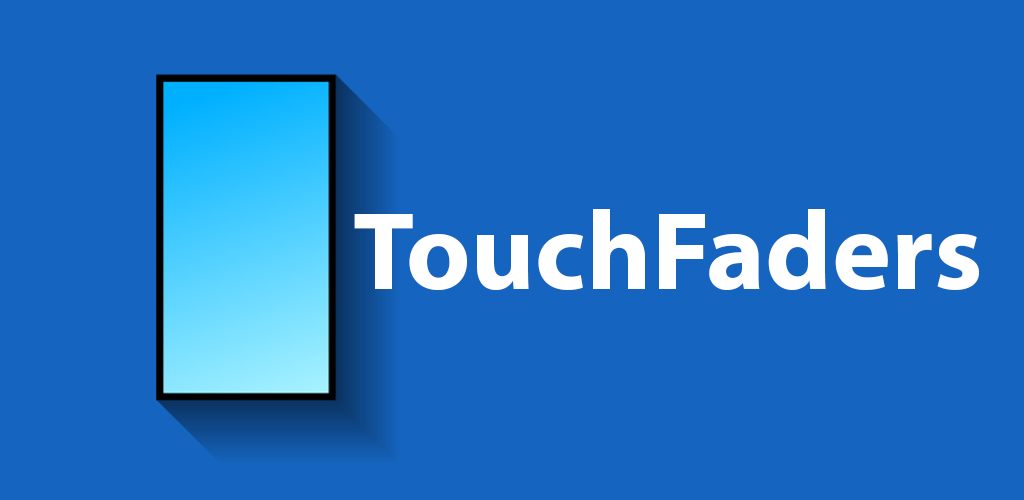
<style>
.page{position:relative;width:1024px;height:500px;background:#1565c0}
.page>*{position:absolute;margin:0}
.t1{font:112px "MyriadPro-Bold";color:#ffffff}
</style>
<div class="page">
<p class="t1" style="left:354px;top:209px;width:625px;height:82px">TouchFaders</p>
</div>
